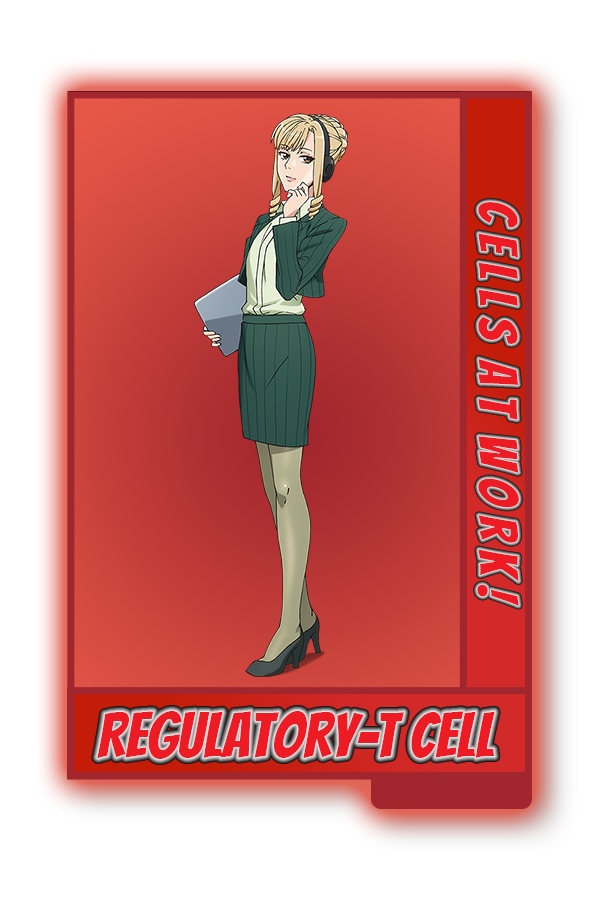
<style>
.page{position:relative;width:600px;height:900px;background:#ffffff}
.page>*{position:absolute;margin:0}
.t1{font:54px "Bangers-Regular";color:#ed1c24}
.t2{font:62.5px "Bangers-Regular";color:#ed1c24}
</style>
<div class="page">
<p class="t1" style="left:477px;top:202px;width:42px;height:404px;rotate:90deg">C e l l S  A t  W o r k !</p>
<p class="t2" style="left:97px;top:711px;width:398px;height:48px">Regulatory-T Cell</p>
</div>
